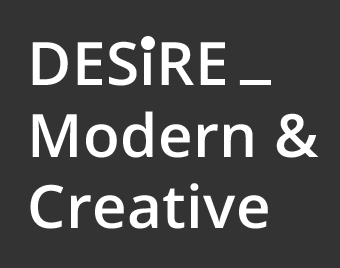
<style>
.page{position:relative;width:340px;height:268px;background:#333333}
.page>*{position:absolute;margin:0}
.t1{font:59.7px "OpenSans-Semibold";letter-spacing:0.005em;color:#ffffff}
.t2{font:72px "OpenSans-Semibold";letter-spacing:0.005em;color:#ffffff}
</style>
<div class="page">
<p class="t1" style="left:30px;top:40px;width:289px;height:189px">DESiRE<br>Modern &amp;<br>Creative</p>
<p class="t2" style="left:239px;top:80px;width:32px;height:5px">_</p>
</div>
